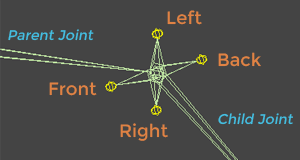
<style>
.page{position:relative;width:300px;height:160px;background:#444444}
.page>*{position:absolute;margin:0}
.t1{font:18px "Montserrat-Regular";color:#e08244}
.t2{font:14px "Montserrat-Regular";color:#44bee1;font-style:italic}
.t3{font:18px "Montserrat-Regular";color:#e18344}
</style>
<div class="page">
<p class="t1" style="left:167px;top:10px;width:35px;height:15px">Left</p>
<p class="t2" style="left:8px;top:29px;width:86px;height:12px">Parent Joint</p>
<p class="t3" style="left:218px;top:52px;width:43px;height:15px">Back</p>
<p class="t1" style="left:49px;top:82px;width:48px;height:14px">Front</p>
<p class="t2" style="left:218px;top:113px;width:75px;height:12px">Child Joint</p>
<p class="t1" style="left:120px;top:123px;width:48px;height:18px">Right</p>
</div>
